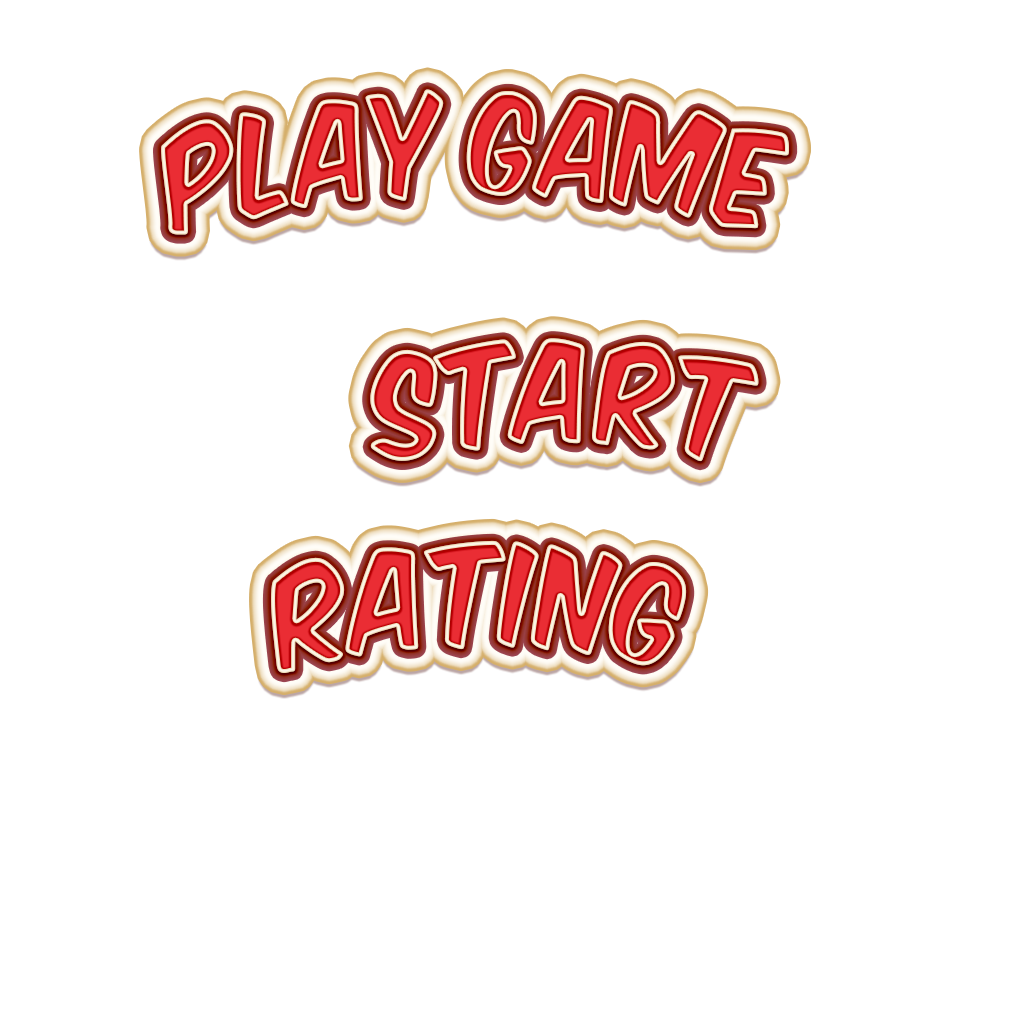
<style>
.page{position:relative;width:1024px;height:1024px;background:#ffffff}
.page>*{position:absolute;margin:0}
.t1{font:120.2px "KomikaPlanes";letter-spacing:0.02em;scale:0.83 1}
</style>
<div class="page">
<p class="t1" style="left:370px;top:338px;width:389px;height:124px">START</p>
<p class="t1" style="left:370px;top:338px;width:389px;height:124px">START</p>
<p class="t1" style="left:271px;top:540px;width:416px;height:133px">Rating</p>
<p class="t1" style="left:271px;top:540px;width:416px;height:133px">Rating</p>
</div>
